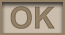
<style>
.page{position:relative;width:65px;height:35px;background:#cbbdab}
.page>*{position:absolute;margin:0}
.t1{font:30px "Arial-BoldMT";color:#948066}
</style>
<div class="page">
<p class="t1" style="left:10px;top:6px;width:45px;height:23px">OK</p>
</div>
